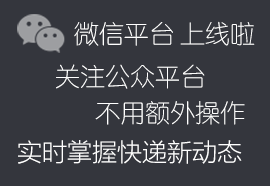
<style>
.page{position:relative;width:270px;height:186px;background:#34363d}
.page>*{position:absolute;margin:0}
.t1{font:25px "STYuanti-SC-Light";color:#ffffff}
.t2{font:25px "DFWaWaSC-W5";color:#ffffff}
.t3{font:25px "FZLTXHK--GBK1-0";color:#ffffff}
</style>
<div class="page">
<p class="t1" style="left:74px;top:21px;width:181px;height:25px">微信平台 上线啦<span class="t2">！</span></p>
<p class="t1" style="left:56px;top:64px;width:149px;height:25px">关注公众平台</p>
<p class="t1" style="left:95px;top:101px;width:150px;height:24px">不用额外操作</p>
<p class="t3" style="left:18px;top:140px;width:224px;height:24px">实时掌握快递新动态</p>
</div>
